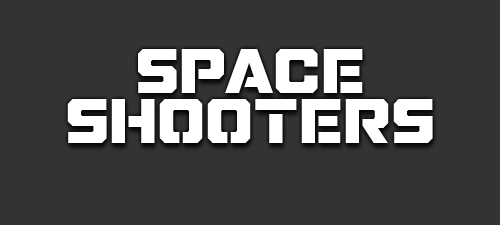
<style>
.page{position:relative;width:500px;height:225px;background:#333333}
.page>*{position:absolute;margin:0}
.t1{font:59.6px/50px "GALACTICVANGUARDIANNCV";color:#ffffff}
</style>
<div class="page">
<p class="t1" style="left:67px;top:49px;width:366px;height:94px;text-align:center">Space<br>shooters</p>
</div>
